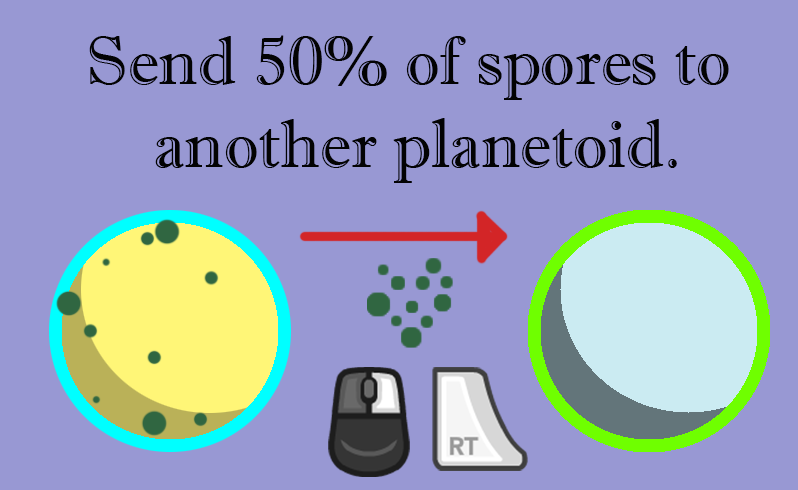
<style>
.page{position:relative;width:798px;height:490px;background:#9898d3}
.page>*{position:absolute;margin:0}
.t1{font:68.7px "ImprintMT-Shadow";color:#030303}
</style>
<div class="page">
<p class="t1" style="left:89px;top:35px;width:640px;height:148px;text-align:center">Send 50% of spores to <br>another planetoid.</p>
</div>
